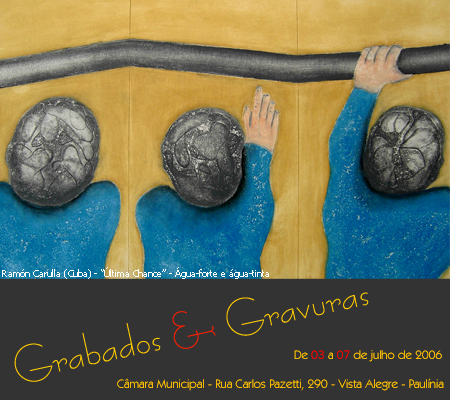
<style>
.page{position:relative;width:450px;height:400px;background:#333333}
.page>*{position:absolute;margin:0}
.t1{font:9px "Tahoma";color:#ffffff}
.t2{font:41.7px "BernhardFashionBT-Regular";color:#ffcc00}
.t3{font:41.7px "BernhardFashionBT-Regular";color:#ff1e00}
.t4{font:12.5px "KabelITCbyBT-Book";color:#ffc000}
.t5{font:12.5px "KabelITCbyBT-Book";color:#ff0000}
</style>
<div class="page">
<p class="t1" style="left:2px;top:267px;width:267px;height:12px">Ramón Carulla (Cuba) - “Última Chance” - Água-forte e água-tinta</p>
<p class="t2" style="left:14px;top:292px;width:355px;height:90px;rotate:-12deg">Grabados <span class="t3">&amp;</span> Gravuras</p>
<p class="t4" style="left:294px;top:350px;width:148px;height:12px">De <span class="t5">03</span> a <span class="t5">07</span> de julho de 2006</p>
<p class="t4" style="left:117px;top:378px;width:327px;height:13px">Câmara Municipal - Rua Carlos Pazetti, 290 - Vista Alegre - Paulínia</p>
</div>
